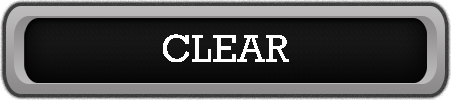
<style>
.page{position:relative;width:451px;height:100px}
.page>*{position:absolute;margin:0}
.t1{font:39.8px "Rockwell";color:#ffffff}
</style>
<div class="page">
<p class="t1" style="left:163px;top:34px;width:126px;height:28px">CLEAR</p>
</div>
